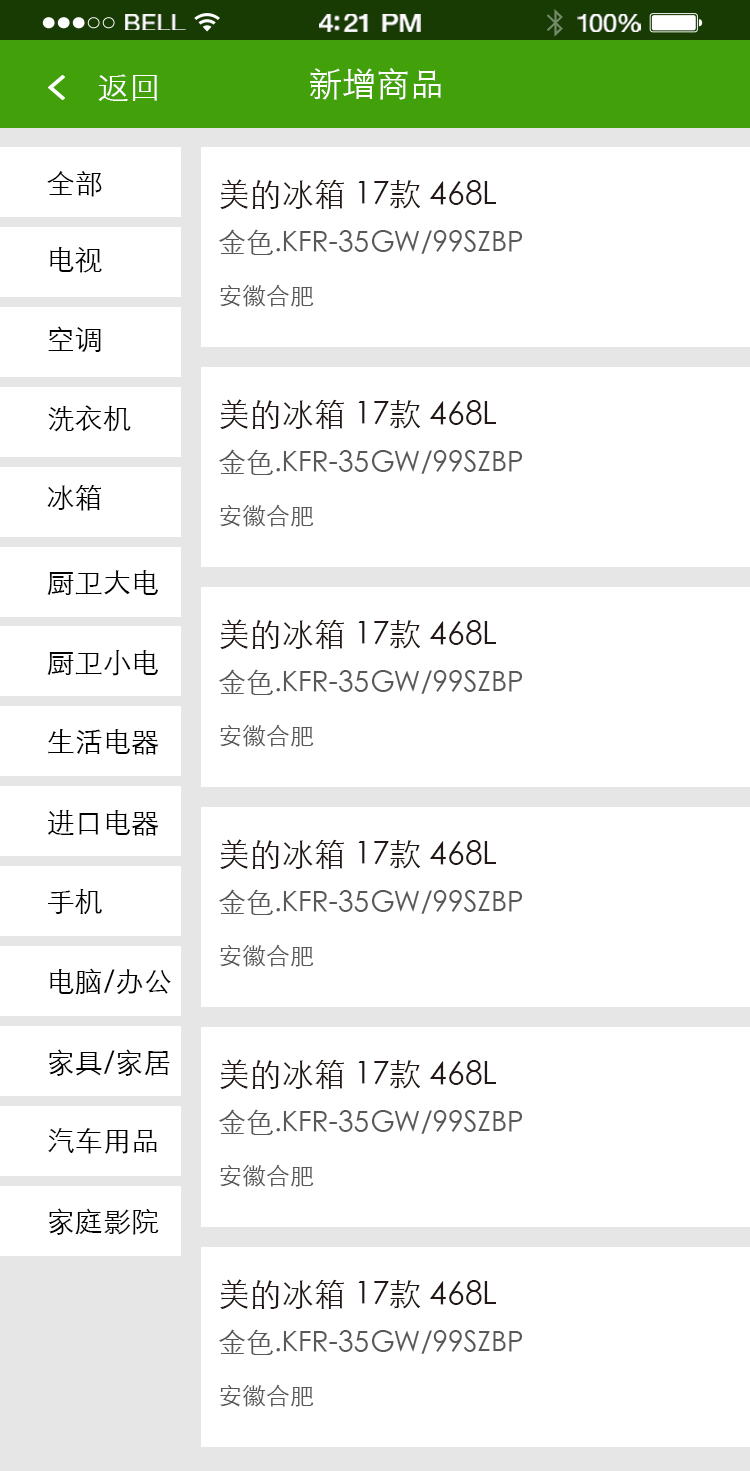
<style>
.page{position:relative;width:750px;height:1471px;background:#ffffff}
.page>*{position:absolute;margin:0}
.t1{font:23.3px "HelveticaNeue";letter-spacing:0.02em;color:#ffffff;scale:1.06 1}
.t2{font:25.3px "HelveticaNeue-Medium";letter-spacing:-0.02em;color:#ffffff;scale:1.06 1}
.t3{font:24.3px "HelveticaNeue";letter-spacing:-0.02em;color:#ffffff;scale:1.06 1}
.t4{font:32px "STXihei";color:#ffffff}
.t5{font:34px "STXihei";color:#ffffff}
.t6{font:28px "STXihei";color:#000000}
.t7{font:32px "STXihei";color:#231815}
.t8{font:28px/56px "STXihei";color:#595757}
.t9{font:24px/56px "STXihei";color:#595757}
</style>
<div class="page">
<p class="t1" style="left:125px;top:14px;width:61px;height:16px">BELL</p>
<p class="t2" style="left:319px;top:14px;width:102px;height:18px">4:21 PM</p>
<p class="t3" style="left:577px;top:14px;width:64px;height:18px">100%</p>
<p class="t4" style="left:98px;top:74px;width:59px;height:27px">返回</p>
<p class="t5" style="left:310px;top:68px;width:131px;height:32px">新增商品</p>
<p class="t6" style="left:47px;top:171px;width:55px;height:26px">全部</p>
<p class="t7" style="left:220px;top:179px;width:276px;height:31px">美的冰箱 17款 468L</p>
<p class="t8" style="left:219px;top:229px;width:304px;height:78px">金色.KFR-35GW/99SZBP<br><span class="t9">安徽合肥</span></p>
<p class="t6" style="left:50px;top:247px;width:52px;height:26px">电视</p>
<p class="t6" style="left:48px;top:326px;width:53px;height:26px">空调</p>
<p class="t7" style="left:220px;top:399px;width:276px;height:31px">美的冰箱 17款 468L</p>
<p class="t6" style="left:48px;top:405px;width:83px;height:27px">洗衣机</p>
<p class="t8" style="left:219px;top:449px;width:304px;height:78px">金色.KFR-35GW/99SZBP<br><span class="t9">安徽合肥</span></p>
<p class="t6" style="left:47px;top:484px;width:55px;height:27px">冰箱</p>
<p class="t6" style="left:47px;top:570px;width:111px;height:25px">厨卫大电</p>
<p class="t7" style="left:220px;top:619px;width:276px;height:31px">美的冰箱 17款 468L</p>
<p class="t6" style="left:47px;top:649px;width:111px;height:27px">厨卫小电</p>
<p class="t8" style="left:219px;top:669px;width:304px;height:78px">金色.KFR-35GW/99SZBP<br><span class="t9">安徽合肥</span></p>
<p class="t6" style="left:48px;top:729px;width:111px;height:26px">生活电器</p>
<p class="t6" style="left:47px;top:809px;width:112px;height:27px">进口电器</p>
<p class="t7" style="left:220px;top:839px;width:276px;height:31px">美的冰箱 17款 468L</p>
<p class="t6" style="left:47px;top:888px;width:55px;height:26px">手机</p>
<p class="t8" style="left:219px;top:889px;width:304px;height:78px">金色.KFR-35GW/99SZBP<br><span class="t9">安徽合肥</span></p>
<p class="t6" style="left:50px;top:968px;width:121px;height:27px">电脑/办公</p>
<p class="t6" style="left:49px;top:1049px;width:121px;height:27px">家具/家居</p>
<p class="t7" style="left:220px;top:1059px;width:276px;height:31px">美的冰箱 17款 468L</p>
<p class="t8" style="left:219px;top:1109px;width:304px;height:78px">金色.KFR-35GW/99SZBP<br><span class="t9">安徽合肥</span></p>
<p class="t6" style="left:48px;top:1128px;width:109px;height:26px">汽车用品</p>
<p class="t6" style="left:49px;top:1208px;width:110px;height:27px">家庭影院</p>
<p class="t7" style="left:220px;top:1279px;width:276px;height:31px">美的冰箱 17款 468L</p>
<p class="t8" style="left:219px;top:1329px;width:304px;height:78px">金色.KFR-35GW/99SZBP<br><span class="t9">安徽合肥</span></p>
</div>
